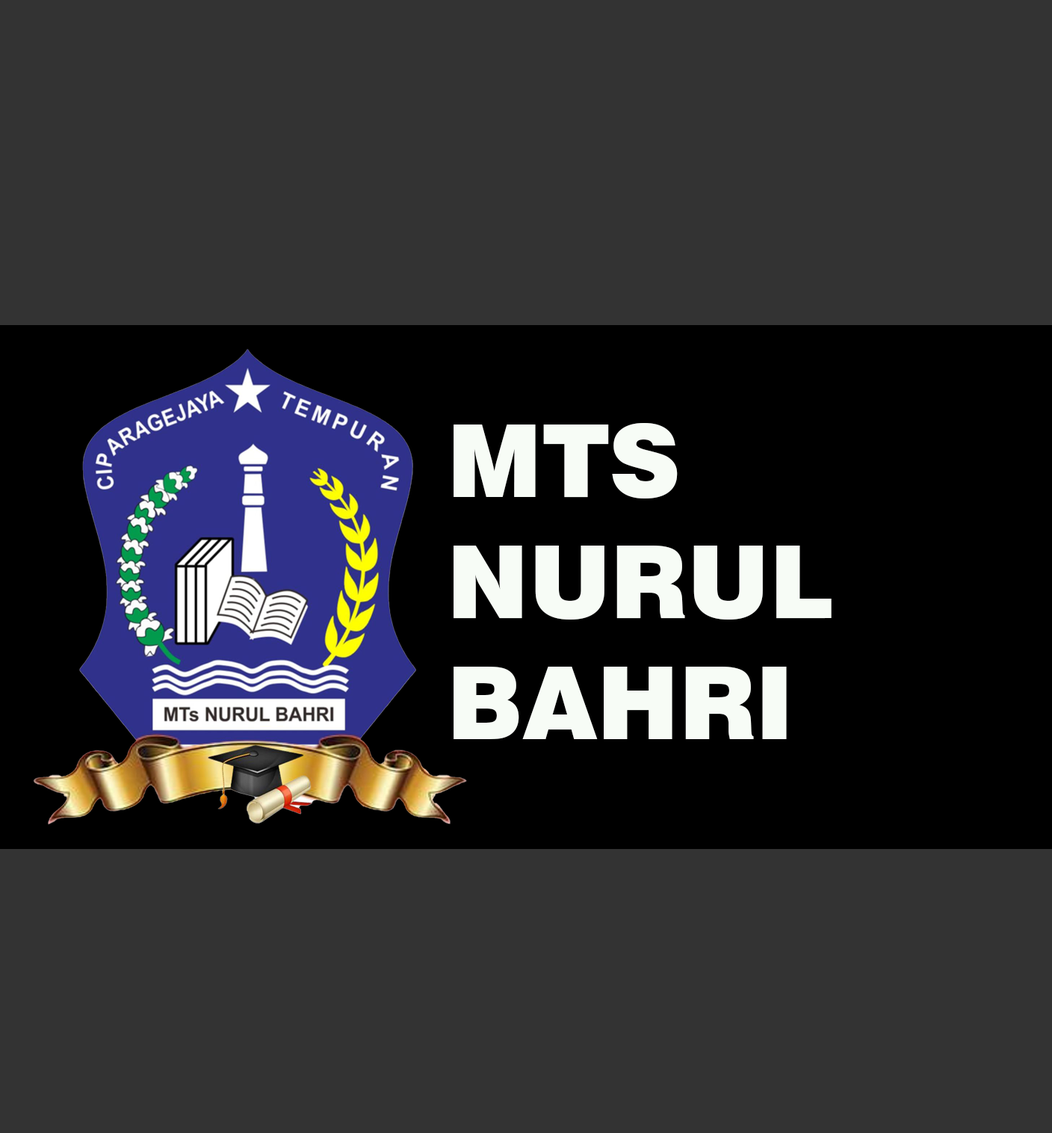
<style>
.page{position:relative;width:1052px;height:1133px;background:#333333}
.page>*{position:absolute;margin:0}
.t1{font:100.7px "Swiss721BT-Black";color:#f7fcf6}
</style>
<div class="page">
<p class="t1" style="left:454px;top:423px;width:378px;height:316px">MTS <br>NURUL <br>BAHRI</p>
</div>
